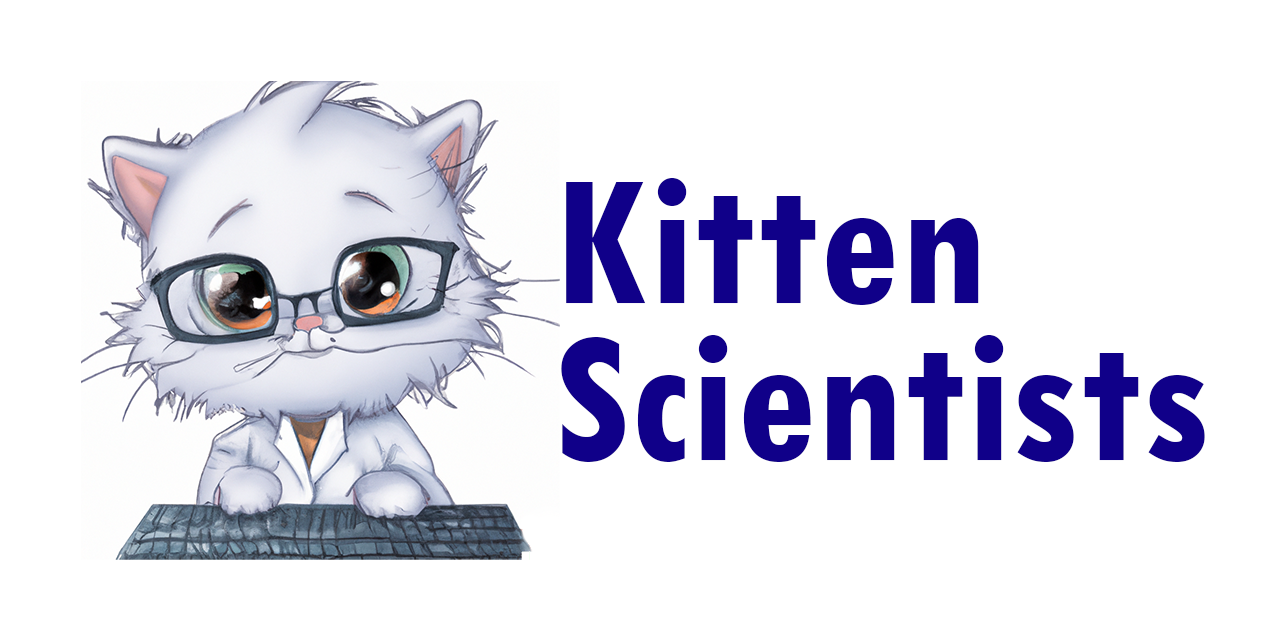
<style>
.page{position:relative;width:1280px;height:640px;background:#ffffff}
.page>*{position:absolute;margin:0}
.t1{font:199px/157.9px "TwCenMT-CondensedBold";color:#100089}
</style>
<div class="page">
<p class="t1" style="left:561px;top:178px;width:644px;height:284px">Kitten<br>Scientists</p>
</div>
